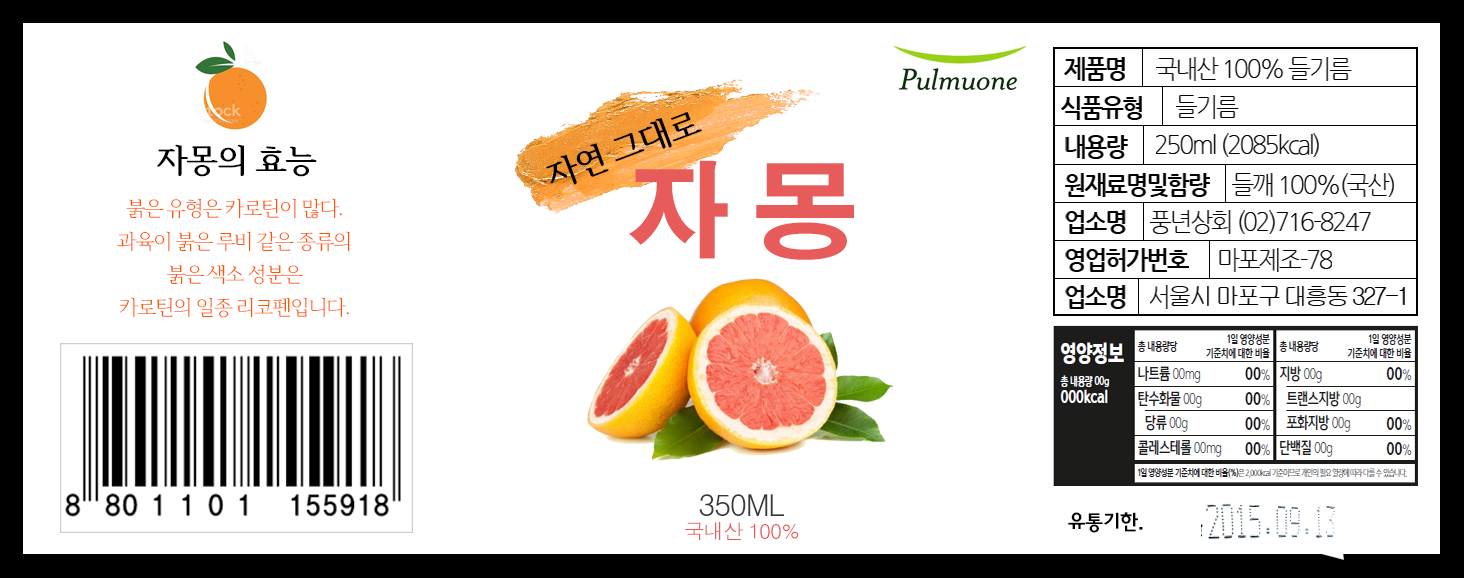
<style>
.page{position:relative;width:1464px;height:578px;background:#ffffff}
.page>*{position:absolute;margin:0}
.t1{font:25px "NanumGothicBold";letter-spacing:-0.08em;color:#000000;scale:0.96 1}
.t2{font:25px "NanumGothicLight";letter-spacing:-0.08em;color:#000000;scale:0.96 1}
.t3{font:33.3px "HCRBatang-Bold";letter-spacing:-0.06em;color:#000000;text-transform:uppercase}
.t4{font:104.2px "H2gtrE";letter-spacing:-0.06em;color:#e75b5b;text-transform:uppercase}
.t5{font:20.8px/33.3px "HCRBatang";letter-spacing:-0.1em;color:#ff5705;text-transform:uppercase}
.t6{font:25px "Gulim";letter-spacing:-0.12em;color:#000000;scale:0.96 1}
.t7{font:25px "NanumGothicLight";letter-spacing:-0.12em;color:#000000;scale:0.96 1}
.t8{font:30.3px "Dotum";letter-spacing:-0.06em;color:#383838;text-transform:uppercase}
.t9{font:20.8px "HaanYGodic24";letter-spacing:-0.06em;color:#000000;text-transform:uppercase}
.t10{font:20.8px "Dotum";letter-spacing:-0.06em;color:#e75b5b;text-transform:uppercase}
</style>
<div class="page">
<p class="t1" style="left:1064px;top:57px;width:61px;height:24px">제품명</p>
<p class="t2" style="left:1156px;top:57px;width:196px;height:24px">국내산 100% 들기름</p>
<p class="t1" style="left:1061px;top:96px;width:81px;height:24px">식품유형</p>
<p class="t2" style="left:1176px;top:95px;width:63px;height:24px">들기름</p>
<p class="t3" style="left:546px;top:112px;width:156px;height:73px;rotate:-21deg">자연 그대로</p>
<p class="t1" style="left:1065px;top:135px;width:63px;height:24px">내용량</p>
<p class="t2" style="left:1156px;top:133px;width:163px;height:24px">250ml (2085kcal)</p>
<p class="t3" style="left:157px;top:144px;width:160px;height:33px">자몽의 효능</p>
<p class="t4" style="left:629px;top:160px;width:225px;height:100px">자 몽</p>
<p class="t1" style="left:1065px;top:173px;width:145px;height:24px">원재료명및함량</p>
<p class="t2" style="left:1232px;top:173px;width:162px;height:24px">들깨 100%(국산)</p>
<p class="t5" style="left:117px;top:198px;width:233px;height:120px;text-align:center">붉은 유형은 카로틴이 많다. <br>과육이 붉은 루비 같은 종류의 <br>붉은 색소 성분은 <br>카로틴의 일종 리코펜입니다.</p>
<p class="t1" style="left:1065px;top:210px;width:61px;height:24px">업소명</p>
<p class="t2" style="left:1150px;top:210px;width:221px;height:24px">풍년상회 (02)716-8247</p>
<p class="t1" style="left:1065px;top:248px;width:124px;height:24px">영업허가번호</p>
<p class="t2" style="left:1219px;top:248px;width:113px;height:24px">마포제조-78</p>
<p class="t1" style="left:1065px;top:285px;width:61px;height:24px">업소명</p>
<p class="t6" style="left:1150px;top:285px;width:255px;height:24px"><span class="t7">서</span>울시 마포구 대흥동 327-1</p>
<p class="t8" style="left:699px;top:494px;width:85px;height:22px">350ml</p>
<p class="t9" style="left:1068px;top:512px;width:75px;height:21px">유통기한.</p>
<p class="t10" style="left:685px;top:522px;width:114px;height:18px">국내산 100%</p>
</div>
